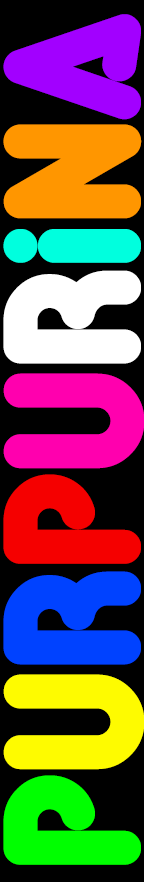
<style>
.page{position:relative;width:144px;height:882px;background:#000000}
.page>*{position:absolute;margin:0}
.t1{font:180px "GaroaHackerClube-Bold";color:#00ff00}
.t2{font:180px "GaroaHackerClube-Bold";color:#fefb00}
.t3{font:180px "GaroaHackerClube-Bold";color:#0042ff}
.t4{font:180px "GaroaHackerClube-Bold";color:#f50000}
.t5{font:180px "GaroaHackerClube-Bold";color:#ff00ae}
.t6{font:180px "GaroaHackerClube-Bold";color:#ffffff}
.t7{font:180px "GaroaHackerClube-Bold";color:#00ffde}
.t8{font:180px "GaroaHackerClube-Bold";color:#ff9600}
.t9{font:180px "GaroaHackerClube-Bold";color:#a200ff}
</style>
<div class="page">
<p class="t1" style="left:3px;top:14px;width:142px;height:851px;rotate:-90deg">p<span class="t2">u</span><span class="t3">r</span><span class="t4">p</span><span class="t5">u</span><span class="t6">r</span><span class="t7">I</span><span class="t8">n</span><span class="t9">A</span></p>
</div>
